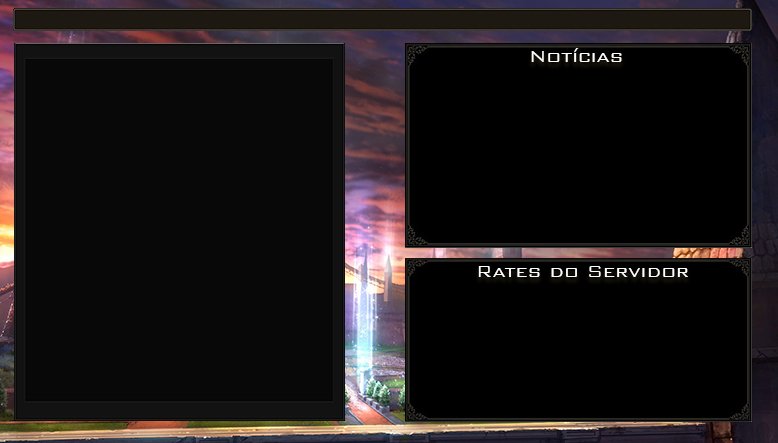
<style>
.page{position:relative;width:778px;height:443px;background:#000000}
.page>*{position:absolute;margin:0}
.t1{font:21.1px "BankGothicBT-Light";color:#ffffff}
</style>
<div class="page">
<p class="t1" style="left:531px;top:48px;width:91px;height:14px">Notícias</p>
<p class="t1" style="left:478px;top:266px;width:210px;height:11px">Rates do Servidor</p>
</div>
